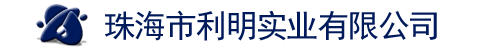
<style>
.page{position:relative;width:500px;height:50px;background:#ffffff}
.page>*{position:absolute;margin:0}
.t1{font:32px "SimHei";letter-spacing:-0.05em;color:#011a5b}
</style>
<div class="page">
<p class="t1" style="left:105px;top:10px;width:332px;height:31px">珠海市利明实业有限公司</p>
</div>
